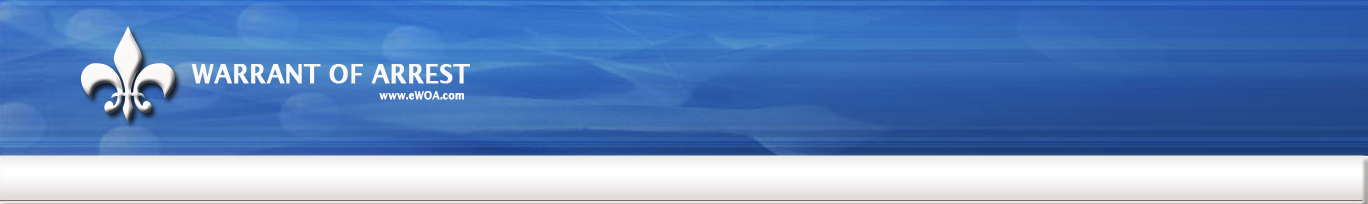
<style>
.page{position:relative;width:1368px;height:204px}
.page>*{position:absolute;margin:0}
.t1{font:26.4px "LucidaSans-Demi";letter-spacing:-0.005em;color:#fbf8f8;font-weight:bold;scale:0.91 1}
.t2{font:11px "LucidaSans-Demi";letter-spacing:-0.005em;color:#fbf8f8;font-weight:bold;scale:0.91 1}
</style>
<div class="page">
<p class="t1" style="left:191px;top:64px;width:279px;height:20px">WARRANT OF ARREST</p>
<p class="t2" style="left:379px;top:91px;width:85px;height:9px">www.eWOA.com</p>
</div>
